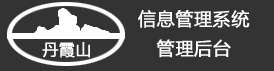
<style>
.page{position:relative;width:274px;height:71px;background:#333333}
.page>*{position:absolute;margin:0}
.t1{font:17.7px/29.6px "MicrosoftYaHei";letter-spacing:0.025em;color:#ffffff;font-weight:bold}
.t2{font:15.8px "MicrosoftYaHei";letter-spacing:0.025em;color:#ffffff;font-weight:bold}
</style>
<div class="page">
<p class="t1" style="left:138px;top:10px;width:112px;height:48px;text-align:center">信息管理系统<br>管理后台</p>
<p class="t2" style="left:42px;top:42px;width:48px;height:16px">丹霞山</p>
</div>
